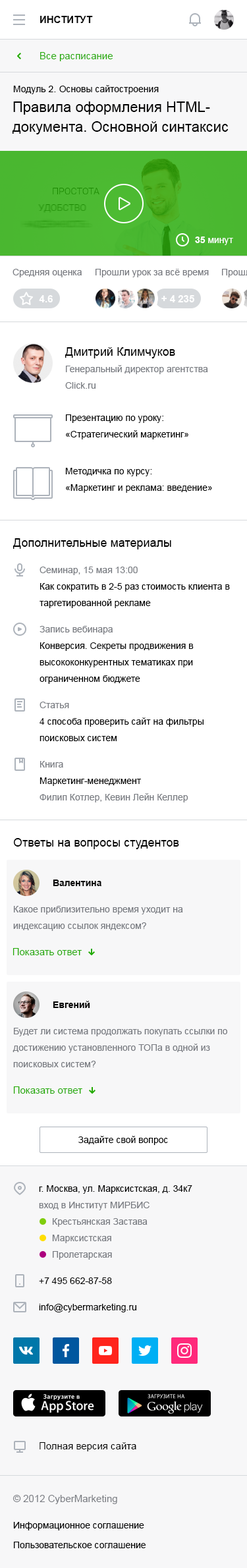
<style>
.page{position:relative;width:247px;height:1568px;background:#ffffff}
.page>*{position:absolute;margin:0}
.t1{font:9.9px "Arial-BoldMT";color:#000000;text-transform:uppercase}
.t2{font:9.9px "ArialMT";color:#21aa00}
.t3{font:9.2px "ArialMT";color:#000000}
.t4{font:9.9px "ArialMT";color:#000000}
.t5{font:14.5px/19.8px "ArialMT";color:#000000}
.t6{font:9.2px "ArialMT";color:#ffffff}
.t7{font:9.2px "Arial-BoldMT";color:#ffffff}
.t8{font:9.2px "ArialMT";color:#787a80}
.t9{font:9.9px "Arial-BoldMT";color:#ffffff;text-transform:uppercase}
.t10{font:11.9px "ArialMT";color:#000000}
.t11{font:9.2px/16.5px "ArialMT";color:#787b81}
.t12{font:9.2px/16.5px "ArialMT";color:#000000}
.t13{font:9.2px "ArialMT";color:#787b81}
.t14{font:9.2px "Arial-BoldMT";color:#000000}
.t15{font:9.2px/26.4px "ArialMT";color:#000000}
.t16{font:9.9px "ArialMT";color:#787b81}
</style>
<div class="page">
<p class="t1" style="left:40px;top:16px;width:53px;height:7px">Институт</p>
<p class="t2" style="left:40px;top:52px;width:73px;height:9px">Все расписание</p>
<p class="t3" style="left:13px;top:85px;width:146px;height:9px">Модуль 2<span class="t4">. </span>Основы сайтостроения</p>
<p class="t5" style="left:12px;top:101px;width:217px;height:33px">Правила оформления HTML-<br>документа. Основной синтаксис</p>
<p class="t6" style="left:195px;top:237px;width:38px;height:8px"><span class="t7">35</span> минут</p>
<p class="t8" style="left:13px;top:269px;width:69px;height:8px">Средняя оценка</p>
<p class="t8" style="left:96px;top:269px;width:113px;height:8px">Прошли урок за всё время</p>
<p class="t9" style="left:39px;top:295px;width:14px;height:7px">4.6</p>
<p class="t9" style="left:161px;top:295px;width:33px;height:7px">+ 4 235</p>
<p class="t10" style="left:65px;top:347px;width:110px;height:11px">Дмитрий Климчуков</p>
<p class="t11" style="left:65px;top:365px;width:143px;height:24px">Генеральный директор агентства <br>Click.ru</p>
<p class="t12" style="left:65px;top:414px;width:123px;height:25px">Презентацию по уроку:<br>«Стратегический маркетинг»</p>
<p class="t12" style="left:65px;top:468px;width:147px;height:25px">Методичка по курсу:<br>«Маркетинг и реклама: введение»</p>
<p class="t10" style="left:13px;top:538px;width:158px;height:11px">Дополнительные материалы</p>
<p class="t13" style="left:40px;top:567px;width:98px;height:8px">Семинар, 15 мая 13:00</p>
<p class="t12" style="left:40px;top:583px;width:190px;height:25px">Как сократить в 2-5 раз стоимость клиента в <br>таргетированной рекламе</p>
<p class="t13" style="left:40px;top:626px;width:73px;height:8px">Запись вебинара</p>
<p class="t12" style="left:40px;top:642px;width:154px;height:42px">Конверсия. Секреты продвижения в <br>высококонкурентных тематиках при <br>ограниченном бюджете</p>
<p class="t13" style="left:40px;top:702px;width:29px;height:6px">Статья</p>
<p class="t12" style="left:40px;top:717px;width:164px;height:24px">4 способа проверить сайт на фильтры <br>поисковых систем</p>
<p class="t13" style="left:40px;top:761px;width:23px;height:7px">Книга</p>
<p class="t11" style="left:40px;top:777px;width:148px;height:25px"><span class="t12">Маркетинг-менеджмент<br></span>Филип Котлер, Кевин Лейн Келлер</p>
<p class="t10" style="left:13px;top:838px;width:166px;height:11px">Ответы на вопросы студентов</p>
<p class="t14" style="left:53px;top:880px;width:48px;height:6px">Валентина</p>
<p class="t11" style="left:13px;top:906px;width:170px;height:25px">Какое приблизительно время уходит на <br>индексацию ссылок яндексом?</p>
<p class="t2" style="left:13px;top:948px;width:69px;height:7px">Показать ответ</p>
<p class="t14" style="left:53px;top:1001px;width:37px;height:7px">Евгений</p>
<p class="t11" style="left:13px;top:1028px;width:214px;height:39px">Будет ли система продолжать покупать ссылки по <br>достижению установленного ТОПа в одной из <br>поисковых систем?</p>
<p class="t2" style="left:13px;top:1086px;width:69px;height:8px">Показать ответ</p>
<p class="t3" style="left:78px;top:1136px;width:90px;height:9px">Задайте свой вопрос</p>
<p class="t12" style="left:39px;top:1185px;width:153px;height:25px">г. Москва, ул. Марксистская, д. 34к7<br><span class="t11">вход в Институт МИРБИС</span></p>
<p class="t13" style="left:53px;top:1218px;width:95px;height:9px">Крестьянская Застава</p>
<p class="t13" style="left:52px;top:1235px;width:59px;height:8px">Марксистская</p>
<p class="t13" style="left:53px;top:1251px;width:59px;height:9px">Пролетарская</p>
<p class="t15" style="left:39px;top:1277px;width:97px;height:35px">+7 495 662-87-58<br>info@cybermarketing.ru</p>
<p class="t4" style="left:40px;top:1442px;width:96px;height:9px">Полная версия сайта</p>
<p class="t16" style="left:13px;top:1495px;width:104px;height:9px">© 2012 CyberMarketing</p>
<p class="t3" style="left:13px;top:1522px;width:131px;height:8px">Информационное соглашение</p>
<p class="t3" style="left:14px;top:1542px;width:132px;height:6px">Пользовательское соглашение</p>
</div>
